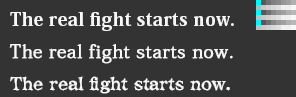
<style>
.page{position:relative;width:296px;height:97px;background:#333333}
.page>*{position:absolute;margin:0}
.t1{font:18px/32px "KozMinPro-Heavy";letter-spacing:0.022em;color:#f8f8f8}
.t2{font:18px/32px "AdobeFangsongStd-Regular";letter-spacing:0.025em;color:#f8f8f8;font-weight:bold}
.t3{font:18px/32px "ComicMysteryStd-DB";letter-spacing:-0.01em;color:#f8f8f8}
</style>
<div class="page">
<p class="t1" style="left:9px;top:12px;width:225px;height:82px">The real fight starts now.<br><span class="t2">The real fight starts now.<br></span><span class="t3">The real fight starts now.</span></p>
</div>
